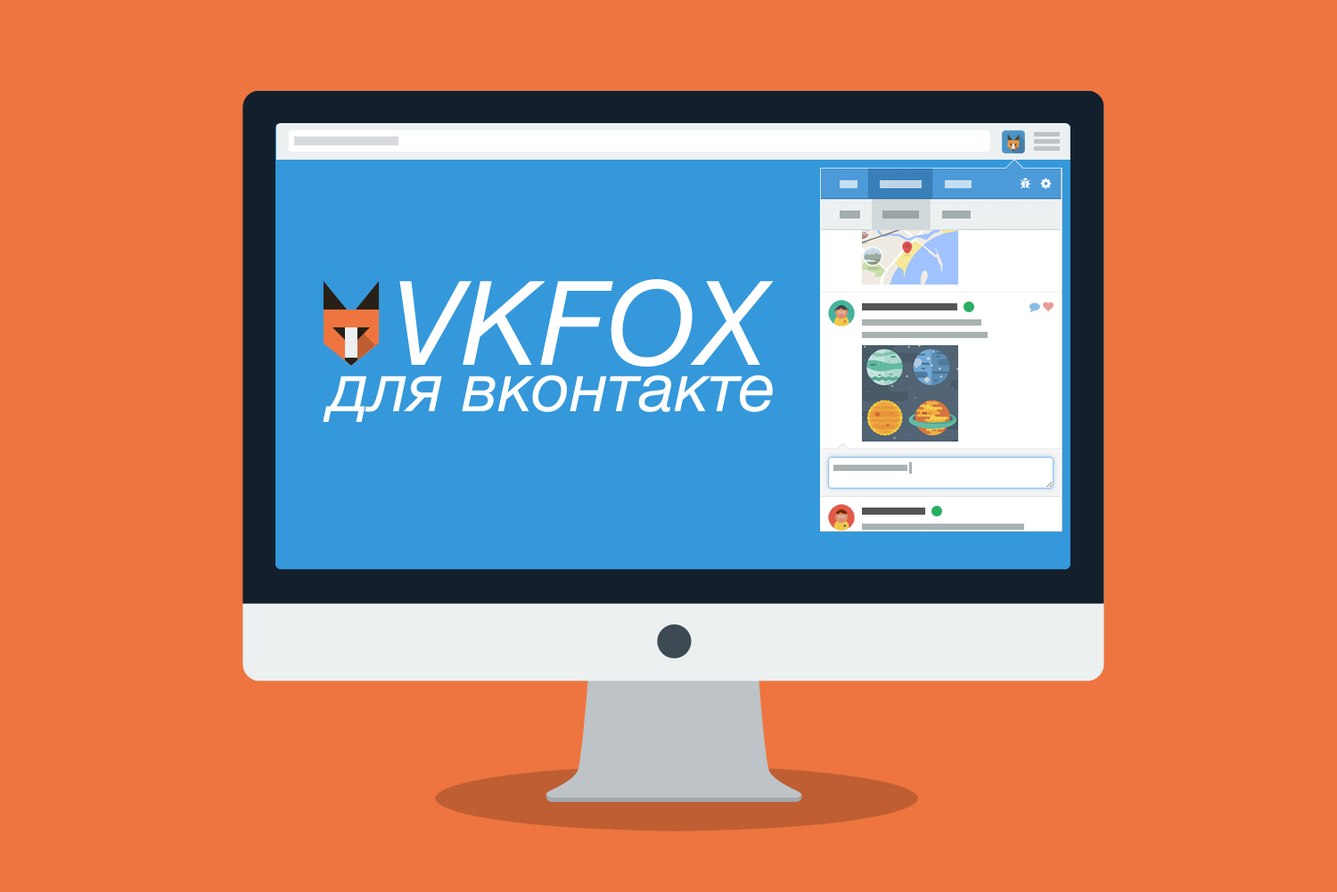
<style>
.page{position:relative;width:1337px;height:892px;background:#ee753f}
.page>*{position:absolute;margin:0}
.t1{font:116.8px "HelveticaNeue-Italic";color:#ffffff}
.t2{font:67.8px "HelveticaNeue-Italic";color:#ffffff}
</style>
<div class="page">
<p class="t1" style="left:399px;top:279px;width:375px;height:87px">VKFOX</p>
<p class="t2" style="left:323px;top:374px;width:450px;height:48px">для вконтакте</p>
</div>
